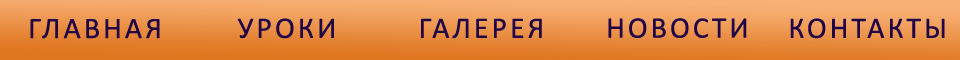
<style>
.page{position:relative;width:960px;height:60px}
.page>*{position:absolute;margin:0}
.t1{font:30px "Calibri";letter-spacing:0.1em;color:#1f0346}
</style>
<div class="page">
<p class="t1" style="left:30px;top:19px;width:130px;height:20px">ГЛАВНАЯ</p>
<p class="t1" style="left:237px;top:18px;width:97px;height:21px">УРОКИ</p>
<p class="t1" style="left:421px;top:18px;width:121px;height:21px">ГАЛЕРЕЯ</p>
<p class="t1" style="left:608px;top:18px;width:139px;height:20px">НОВОСТИ</p>
<p class="t1" style="left:790px;top:18px;width:155px;height:21px">КОНТАКТЫ</p>
</div>
